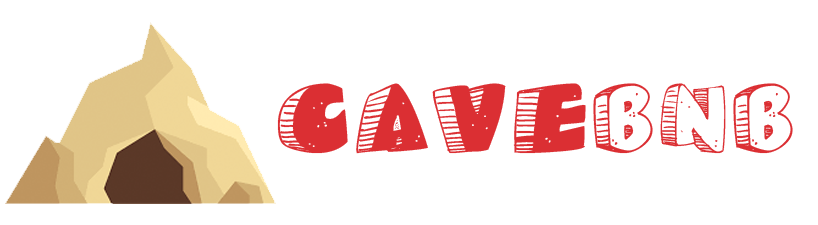
<style>
.page{position:relative;width:818px;height:225px;background:#ffffff}
.page>*{position:absolute;margin:0}
.t1{font:68.9px "Caveman";letter-spacing:0.16em;color:#db2f33}
.t2{font:68.9px "Caveman";letter-spacing:0.06em;color:#db2f33}
.t3{font:68.9px "Caveman";letter-spacing:0.42em;color:#db2f33}
</style>
<div class="page">
<p class="t1" style="left:277px;top:83px;width:516px;height:71px"><span class="t2">c</span><span class="t3">a</span><span class="t2">v</span>eBNB</p>
</div>
